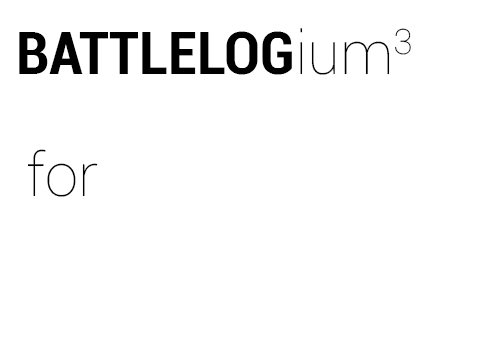
<style>
.page{position:relative;width:504px;height:360px;background:#ffffff}
.page>*{position:absolute;margin:0}
.t1{font:60px "Roboto-BoldCondensed";color:#000000}
.t2{font:60px "Roboto-Thin";color:#000000}
.t3{font:60px "RobotoSlab-Thin";color:#000000}
</style>
<div class="page">
<p class="t1" style="left:19px;top:28px;width:392px;height:47px">BATTLELOG<span class="t2">ium</span><span class="t3">3</span></p>
<p class="t2" style="left:27px;top:149px;width:71px;height:48px">for</p>
</div>
